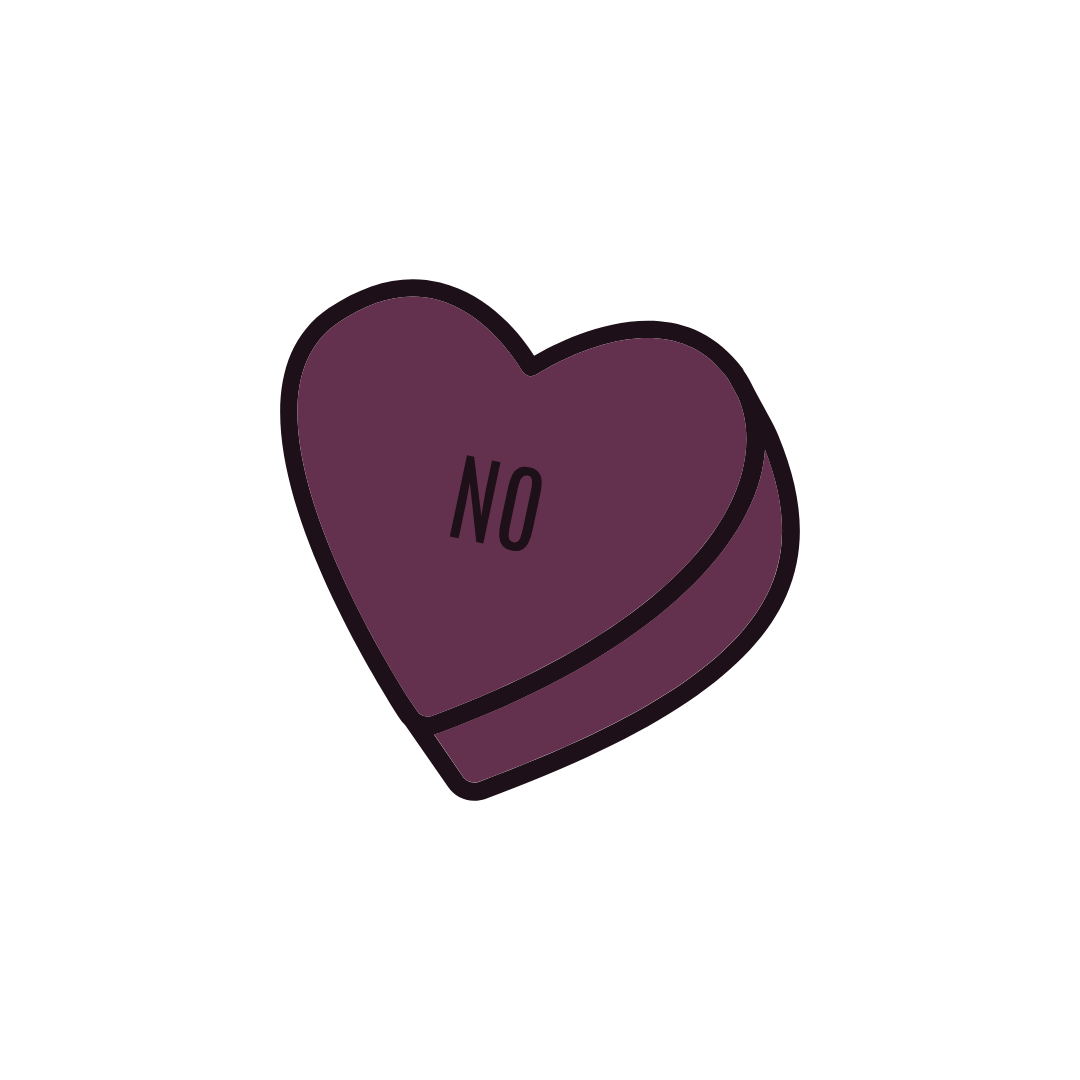
<style>
.page{position:relative;width:1080px;height:1080px;background:#ffffff}
.page>*{position:absolute;margin:0}
.t1{font:96.6px "Antonio-Regular";color:#1e1018}
</style>
<div class="page">
<p class="t1" style="left:449px;top:455px;width:93px;height:97px;rotate:12deg">NO</p>
</div>
